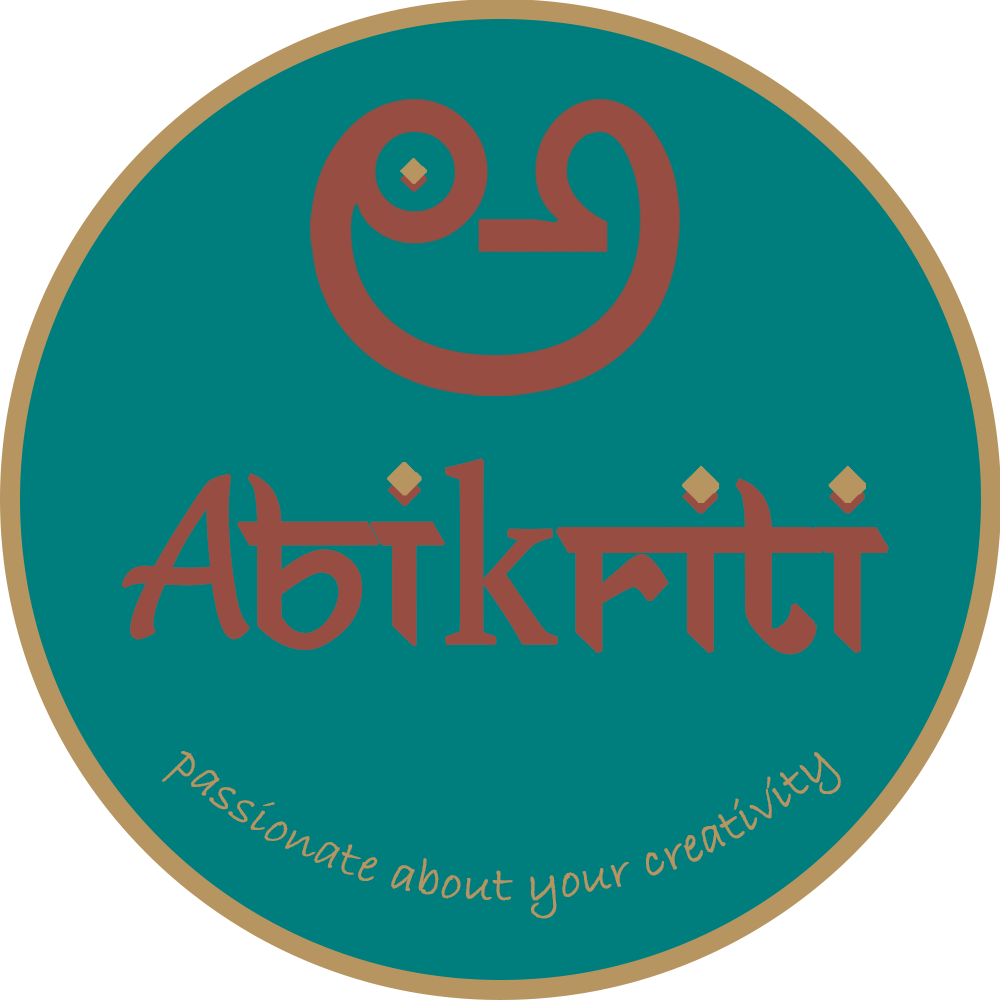
<style>
.page{position:relative;width:1000px;height:1000px;background:#007d7d}
.page>*{position:absolute;margin:0}
.t1{font:246.7px "Constantia";color:#974d42;font-weight:bold;scale:0.86 1}
.t2{font:211.9px "LucidaHandwriting-Italic";color:#974d42;font-weight:bold;scale:0.81 1}
.t3{font:230.5px "AnandaNamaste";color:#974d42;font-weight:bold}
.t4{font:50.1px "BradleyHandITC";color:#b79561;font-weight:bold;scale:1.03 1}
</style>
<div class="page">
<p class="t1" style="left:445px;top:458px;width:113px;height:187px">k</p>
<p class="t2" style="left:121px;top:473px;width:129px;height:167px">A</p>
<p class="t3" style="left:237px;top:473px;width:208px;height:177px">bi</p>
<p class="t3" style="left:555px;top:477px;width:334px;height:178px">riti</p>
<p class="t4" style="left:162px;top:751px;width:679px;height:168px;rotate:-1deg">passionate about your creativity</p>
</div>
